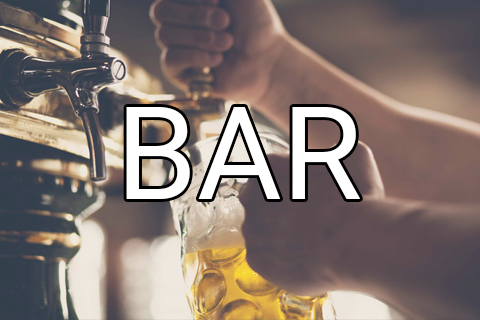
<style>
.page{position:relative;width:480px;height:320px}
.page>*{position:absolute;margin:0}
.t1{font:130px "Roboto-Regular";color:#ffffff}
</style>
<div class="page">
<p class="t1" style="left:126px;top:107px;width:234px;height:92px">BAR</p>
</div>
